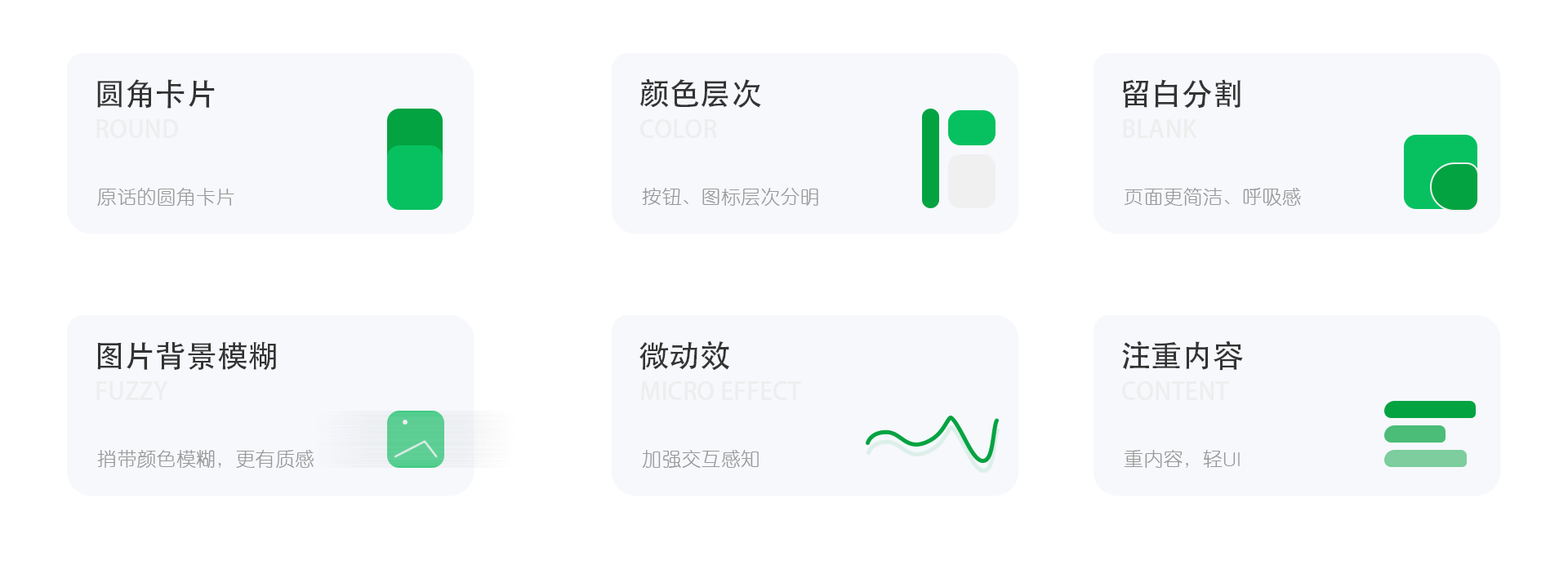
<style>
.page{position:relative;width:1568px;height:565px;background:#ffffff}
.page>*{position:absolute;margin:0}
.t1{font:30.9px "AdobeHeitiStd-Regular";color:#333333}
.t2{font:24.5px "AdobeHeitiStd-Regular";color:#eeeeee}
.t3{font:19.8px "Tensentype-JiaLiXiYuanJ";color:#999999}
</style>
<div class="page">
<p class="t1" style="left:97px;top:79px;width:118px;height:30px">圆角卡片</p>
<p class="t1" style="left:640px;top:78px;width:121px;height:30px">颜色层次</p>
<p class="t1" style="left:1122px;top:79px;width:119px;height:30px">留白分割</p>
<p class="t2" style="left:96px;top:119px;width:82px;height:19px">ROUND</p>
<p class="t2" style="left:640px;top:119px;width:77px;height:19px">COLOR</p>
<p class="t2" style="left:1123px;top:119px;width:74px;height:19px">BLANK</p>
<p class="t3" style="left:97px;top:188px;width:137px;height:18px">原话的圆角卡片</p>
<p class="t3" style="left:642px;top:188px;width:176px;height:18px">按钮、图标层次分明</p>
<p class="t3" style="left:1125px;top:188px;width:176px;height:18px">页面更简洁、呼吸感</p>
<p class="t1" style="left:97px;top:341px;width:179px;height:30px">图片背景模糊</p>
<p class="t1" style="left:639px;top:341px;width:91px;height:30px">微动效</p>
<p class="t1" style="left:1122px;top:341px;width:121px;height:30px">注重内容</p>
<p class="t2" style="left:96px;top:381px;width:72px;height:19px">FUZZY</p>
<p class="t2" style="left:641px;top:381px;width:160px;height:19px">MICRO EFFECT</p>
<p class="t2" style="left:1122px;top:381px;width:107px;height:19px">CONTENT</p>
<p class="t3" style="left:97px;top:450px;width:217px;height:18px">捎带颜色模糊，更有质感</p>
<p class="t3" style="left:642px;top:450px;width:117px;height:18px">加强交互感知</p>
<p class="t3" style="left:1124px;top:450px;width:116px;height:18px">重内容，轻UI</p>
</div>
